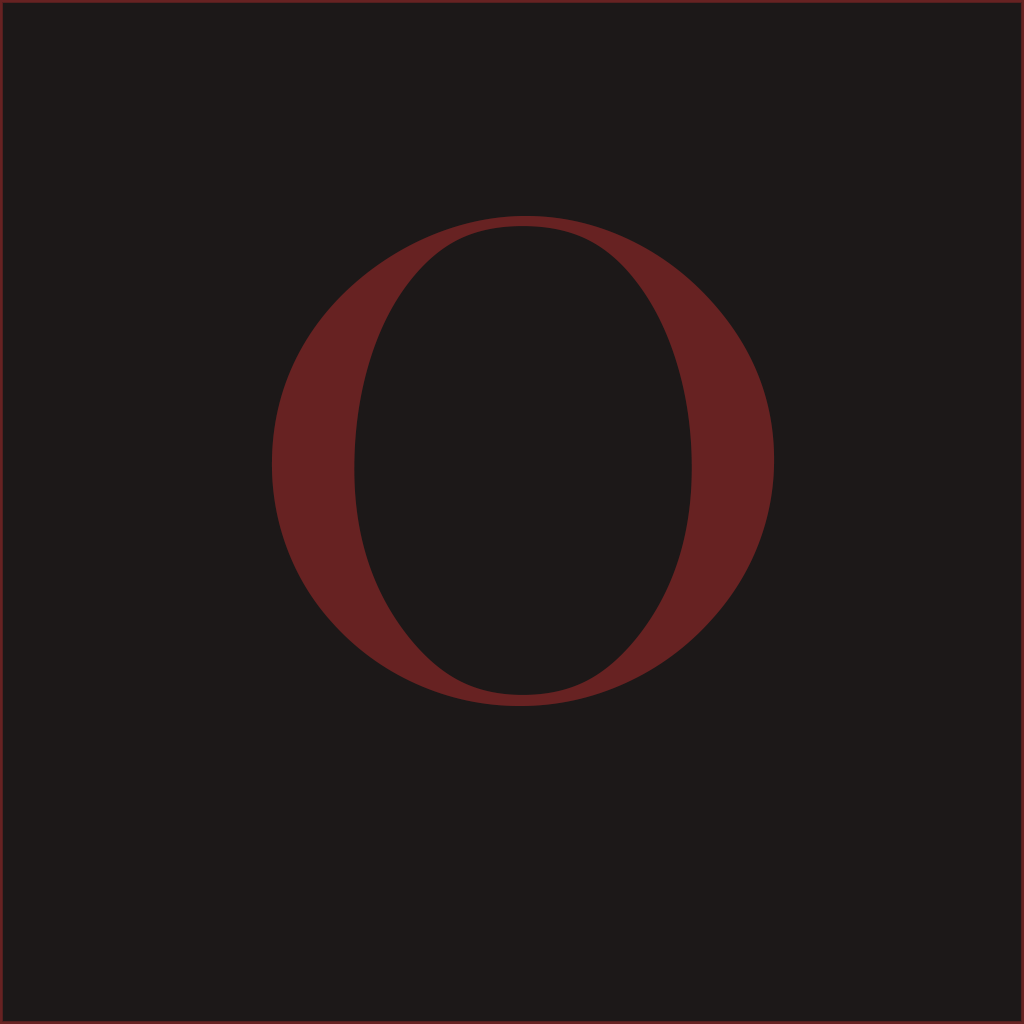
<style>
.page{position:relative;width:1024px;height:1024px;background:#1c1818}
.page>*{position:absolute;margin:0}
.t1{font:700px "BaskOldFace";color:#672222}
</style>
<div class="page">
<p class="t1" style="left:271px;top:215px;width:504px;height:491px">O</p>
</div>
